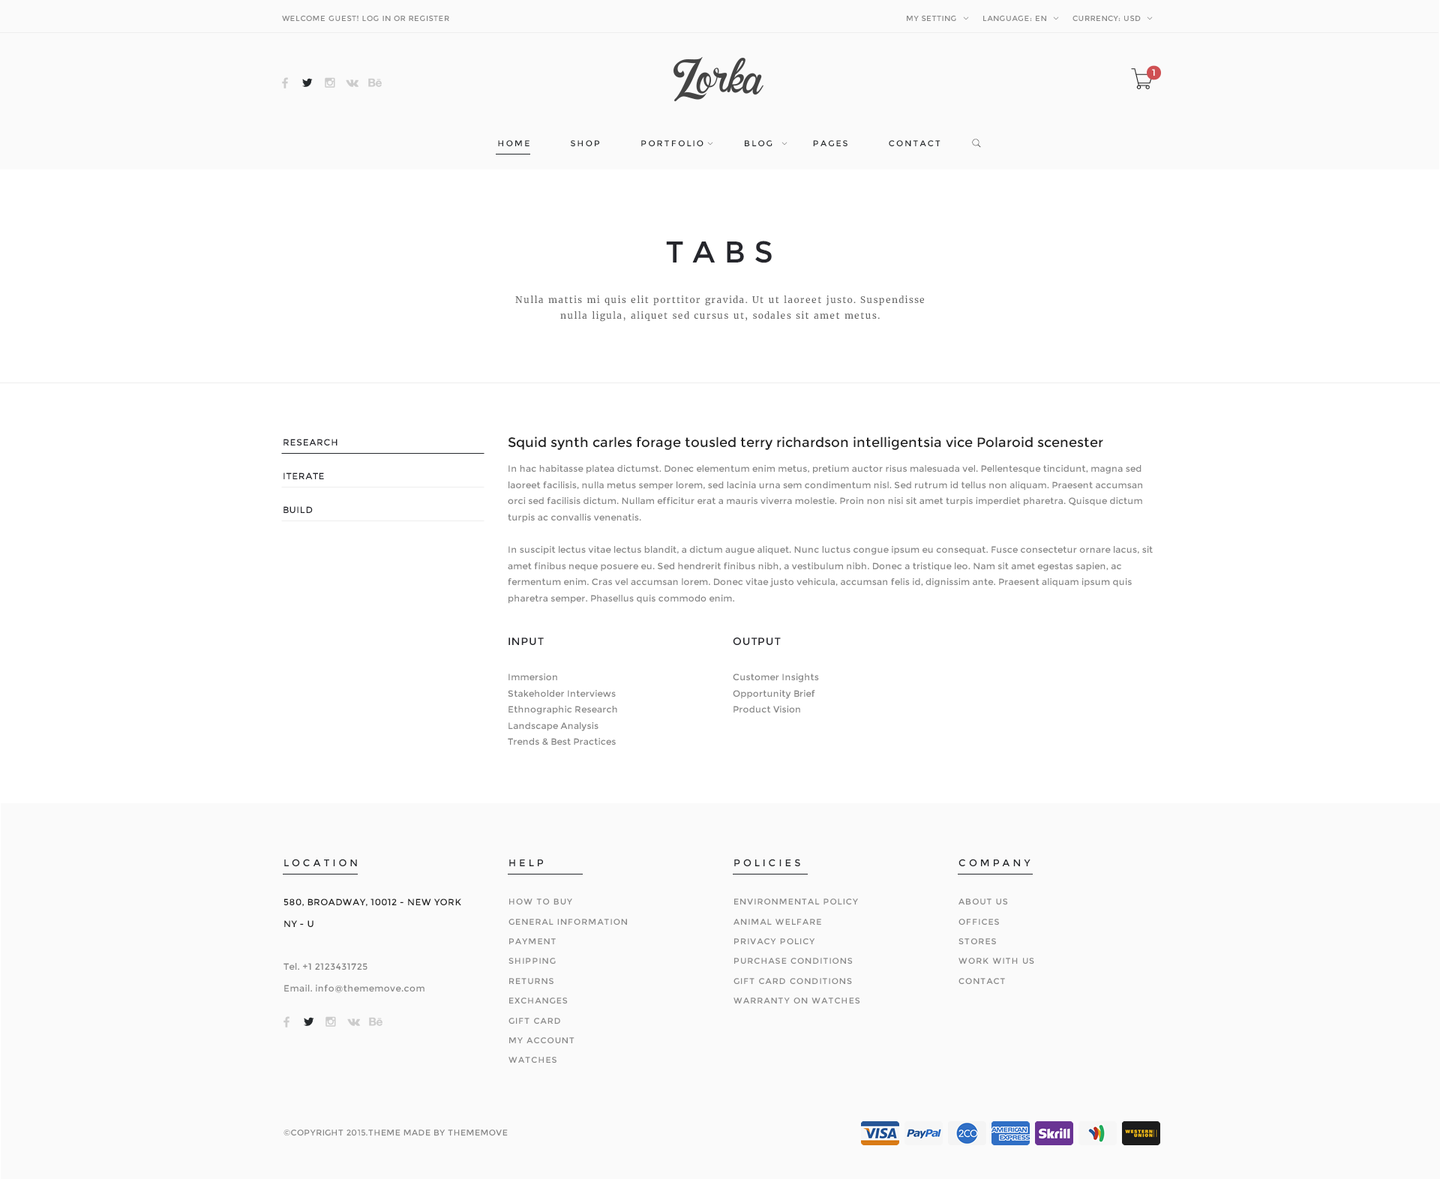
<style>
.page{position:relative;width:1440px;height:1179px;background:#ffffff}
.page>*{position:absolute;margin:0}
.t1{font:7.5px "Montserrat-Regular";letter-spacing:0.05em;color:#888888}
.t2{font:9px "Montserrat-Regular";letter-spacing:0.3em;color:#ffffff}
.t3{font:8.2px "Montserrat-Regular";letter-spacing:0.2em;color:#25292c}
.t4{font:30px "Montserrat-Regular";letter-spacing:0.3em;color:#25262c}
.t5{font:9px/16.2px "Merriweather-Regular";letter-spacing:0.1em;color:#666666}
.t6{font:13.5px "Montserrat-Regular";color:#222222}
.t7{font:9px "Montserrat-Regular";letter-spacing:0.05em;color:#25262c}
.t8{font:9px/16.2px "Montserrat-Regular";letter-spacing:0.02em;color:#868686}
.t9{font:10.5px "Montserrat-Regular";letter-spacing:0.05em;color:#25262c}
.t10{font:9.8px "Montserrat-Regular";letter-spacing:0.3em;color:#25282c}
.t11{font:9px/21.6px "Montserrat-Regular";letter-spacing:0.04em;color:#868686}
.t12{font:9px/21.6px "Montserrat-Regular";letter-spacing:0.04em;color:#202020}
.t13{font:8.2px/19.8px "Montserrat-Regular";letter-spacing:0.1em;color:#888888}
.t14{font:8.2px/19.8px "Montserrat-Regular";letter-spacing:0.1em;color:#878787}
.t15{font:8.2px "Montserrat-Regular";letter-spacing:0.04em;color:#868686}
</style>
<div class="page">
<p class="t1" style="left:282px;top:15px;width:167px;height:6px">WELCOME GUEST! LOG IN OR REGISTER</p>
<p class="t1" style="left:907px;top:15px;width:49px;height:6px">MY SETTING</p>
<p class="t1" style="left:983px;top:15px;width:63px;height:6px">LANGUAGE: EN</p>
<p class="t1" style="left:1072px;top:15px;width:69px;height:6px">CURRENCY: USD</p>
<p class="t2" style="left:1152px;top:69px;width:3px;height:7px">1</p>
<p class="t3" style="left:498px;top:140px;width:442px;height:6px">HOME          SHOP          PORTFOLIO          BLOG          PAGES          CONTACT</p>
<p class="t4" style="left:666px;top:241px;width:106px;height:22px">TABS</p>
<p class="t5" style="left:515px;top:296px;width:409px;height:26px;text-align:center">Nulla mattis mi quis elit porttitor gravida. Ut ut laoreet justo. Suspendisse nulla ligula, aliquet sed cursus ut, sodales sit amet metus.</p>
<p class="t6" style="left:508px;top:436px;width:595px;height:14px">Squid synth carles forage tousled terry richardson intelligentsia vice Polaroid scenester</p>
<p class="t7" style="left:284px;top:439px;width:54px;height:7px">RESEARCH</p>
<p class="t7" style="left:284px;top:472px;width:40px;height:7px">ITERATE</p>
<p class="t8" style="left:508px;top:465px;width:645px;height:139px">In hac habitasse platea dictumst. Donec elementum enim metus, pretium auctor risus malesuada vel. Pellentesque tincidunt, magna sed laoreet facilisis, nulla metus semper lorem, sed lacinia urna sem condimentum nisl. Sed rutrum id tellus non aliquam. Praesent accumsan orci sed facilisis dictum. Nullam efficitur erat a mauris viverra molestie. Proin non nisi sit amet turpis imperdiet pharetra. Quisque dictum turpis ac convallis venenatis.<br><br>In suscipit lectus vitae lectus blandit, a dictum augue aliquet. Nunc luctus congue ipsum eu consequat. Fusce consectetur ornare lacus, sit amet finibus neque posuere eu. Sed hendrerit finibus nibh, a vestibulum nibh. Donec a tristique leo. Nam sit amet egestas sapien, ac fermentum enim. Cras vel accumsan lorem. Donec vitae justo vehicula, accumsan felis id, dignissim ante. Praesent aliquam ipsum quis pharetra semper. Phasellus quis commodo enim.</p>
<p class="t7" style="left:284px;top:506px;width:29px;height:7px">BUILD</p>
<p class="t9" style="left:508px;top:638px;width:36px;height:7px">INPUT</p>
<p class="t9" style="left:733px;top:638px;width:48px;height:7px">OUTPUT</p>
<p class="t8" style="left:508px;top:674px;width:109px;height:72px">Immersion<br>Stakeholder Interviews<br>Ethnographic Research<br>Landscape Analysis<br>Trends &amp; Best Practices</p>
<p class="t8" style="left:733px;top:674px;width:86px;height:38px">Customer Insights<br>Opportunity Brief<br>Product Vision</p>
<p class="t10" style="left:284px;top:859px;width:73px;height:7px">LOCATION</p>
<p class="t10" style="left:509px;top:860px;width:34px;height:6px">HELP</p>
<p class="t10" style="left:734px;top:859px;width:66px;height:7px">POLICIES</p>
<p class="t10" style="left:958px;top:859px;width:72px;height:7px">COMPANY</p>
<p class="t11" style="left:284px;top:898px;width:177px;height:95px"><span class="t12">580, BROADWAY, 10012 - NEW YORK <br>NY - U<br><br></span>Tel. +1 2123431725<br>Email. info@thememove.com</p>
<p class="t13" style="left:508px;top:898px;width:119px;height:165px">HOW TO BUY<br>GENERAL INFORMATION<br>PAYMENT<br>SHIPPING<br>RETURNS<br>EXCHANGES<br>GIFT CARD<br>MY ACCOUNT<br>WATCHES</p>
<p class="t13" style="left:734px;top:898px;width:126px;height:106px">ENVIRONMENTAL POLICY<br>ANIMAL WELFARE<br>PRIVACY POLICY<br>PURCHASE CONDITIONS<br>GIFT CARD CONDITIONS<br>WARRANTY ON WATCHES</p>
<p class="t14" style="left:958px;top:898px;width:76px;height:86px">ABOUT US<br>OFFICES<br>STORES<br>WORK WITH US<br>CONTACT</p>
<p class="t15" style="left:284px;top:1130px;width:224px;height:6px">©COPYRIGHT 2015.THEME MADE BY THEMEMOVE</p>
</div>
